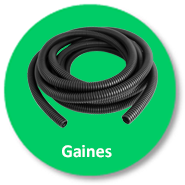
<style>
.page{position:relative;width:185px;height:185px;background:#00cc66}
.page>*{position:absolute;margin:0}
.t1{font:18px "Calibri-Bold";color:#ffffff}
</style>
<div class="page">
<p class="t1" style="left:62px;top:145px;width:50px;height:13px">Gaines</p>
</div>
